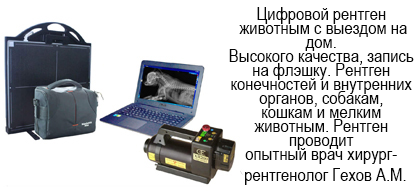
<style>
.page{position:relative;width:420px;height:191px;background:#ffffff}
.page>*{position:absolute;margin:0}
.t1{font:18px/7px "ArialNarrow";letter-spacing:0.002em;color:#070707}
</style>
<div class="page">
<p class="t1" style="left:229px;top:7px;width:185px;height:178px;text-align:center">Цифровой рентген<br><br> животным с выездом на <br><br>дом. <br><br>Высокого качества, запись <br><br>на флэшку. Рентген <br><br>конечностей и внутренних <br><br>органов, собакам, <br><br>кошкам и мелким <br><br>животным. Рентген <br><br>проводит <br><br>опытный врач хирург- <br><br><br>  рентгенолог Гехов А.М.</p>
</div>
